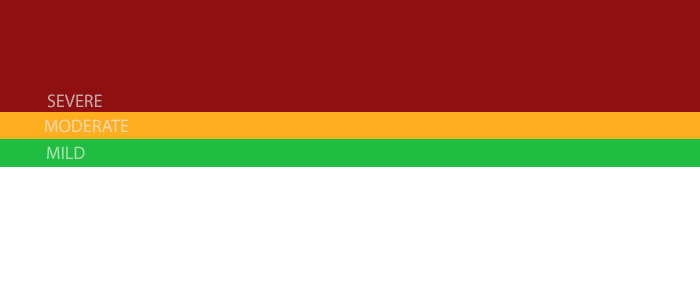
<style>
.page{position:relative;width:700px;height:300px;background:#ffffff}
.page>*{position:absolute;margin:0}
.t1{font:18px "MyriadPro-Regular";color:#cca6a6}
.t2{font:18px "MyriadPro-Regular";color:#ffd9a9}
.t3{font:18px "MyriadPro-Regular";color:#a9e0b1}
</style>
<div class="page">
<p class="t1" style="left:47px;top:94px;width:55px;height:14px">SEVERE</p>
<p class="t2" style="left:45px;top:119px;width:84px;height:14px">MODERATE</p>
<p class="t3" style="left:47px;top:146px;width:38px;height:13px">MILD</p>
</div>
